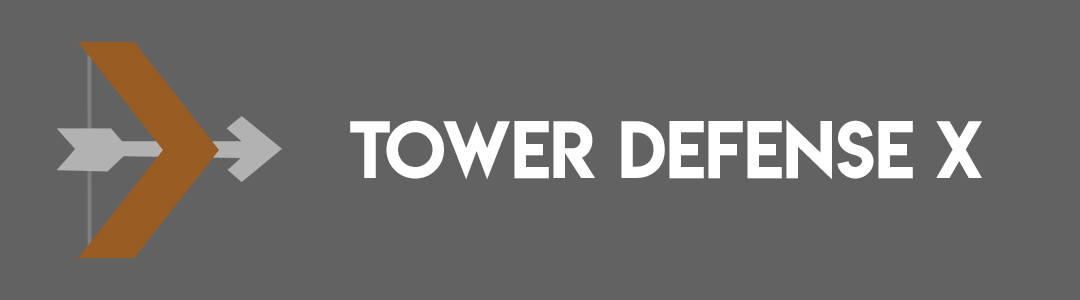
<style>
.page{position:relative;width:1080px;height:300px;background:#626262}
.page>*{position:absolute;margin:0}
.t1{font:72px "LemonMilk";color:#ffffff}
</style>
<div class="page">
<p class="t1" style="left:350px;top:120px;width:632px;height:60px">TOWER DEFENSE X</p>
</div>
